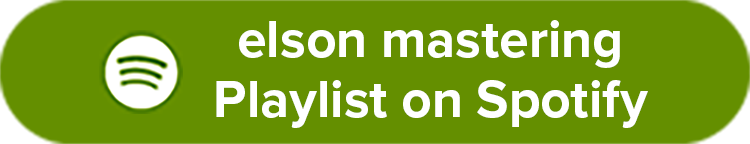
<style>
.page{position:relative;width:750px;height:144px;background:#648f00}
.page>*{position:absolute;margin:0}
.t1{font:54px/60px "ProximaNova-Bold";color:#ffffff}
</style>
<div class="page">
<p class="t1" style="left:216px;top:20px;width:432px;height:108px;text-align:center">elson mastering<br>Playlist on Spotify</p>
</div>
